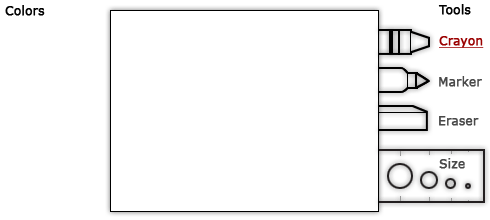
<style>
.page{position:relative;width:490px;height:220px;background:#ffffff}
.page>*{position:absolute;margin:0}
.t1{font:12px "Verdana";color:#000000;font-weight:bold}
.t2{font:12px "Verdana";color:#010101;font-weight:bold}
.t3{font:12px "Verdana";color:#9b0101;font-weight:bold;text-decoration:underline}
.t4{font:12px "Verdana";color:#494949;font-weight:bold}
</style>
<div class="page">
<p class="t1" style="left:5px;top:5px;width:40px;height:11px">Colors</p>
<p class="t2" style="left:438px;top:4px;width:33px;height:11px">Tools</p>
<p class="t3" style="left:439px;top:36px;width:45px;height:12px">Crayon</p>
<p class="t4" style="left:439px;top:76px;width:43px;height:11px">Marker</p>
<p class="t4" style="left:439px;top:116px;width:40px;height:10px">Eraser</p>
<p class="t4" style="left:439px;top:158px;width:26px;height:11px">Size</p>
</div>
